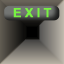
<style>
.page{position:relative;width:64px;height:64px}
.page>*{position:absolute;margin:0}
.t1{font:12.5px "Arial-BoldMT";color:#78f242}
</style>
<div class="page">
<p class="t1" style="left:13px;top:8px;width:39px;height:10px">E X I T</p>
</div>
